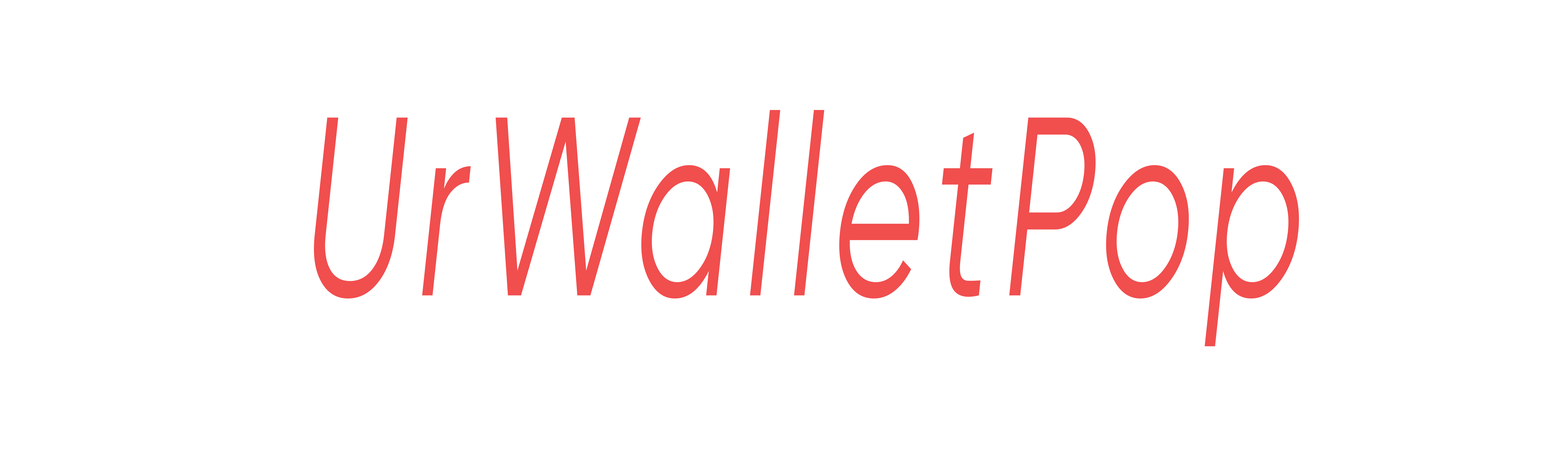
<style>
.page{position:relative;width:1568px;height:453px;background:#ffffff}
.page>*{position:absolute;margin:0}
.t1{font:253.7px "Gilroy-Regular";letter-spacing:0.05em;color:#f14e4e;font-weight:bold;font-style:italic;scale:0.61 1}
</style>
<div class="page">
<p class="t1" style="left:314px;top:110px;width:985px;height:236px">UrWalletPop</p>
</div>
